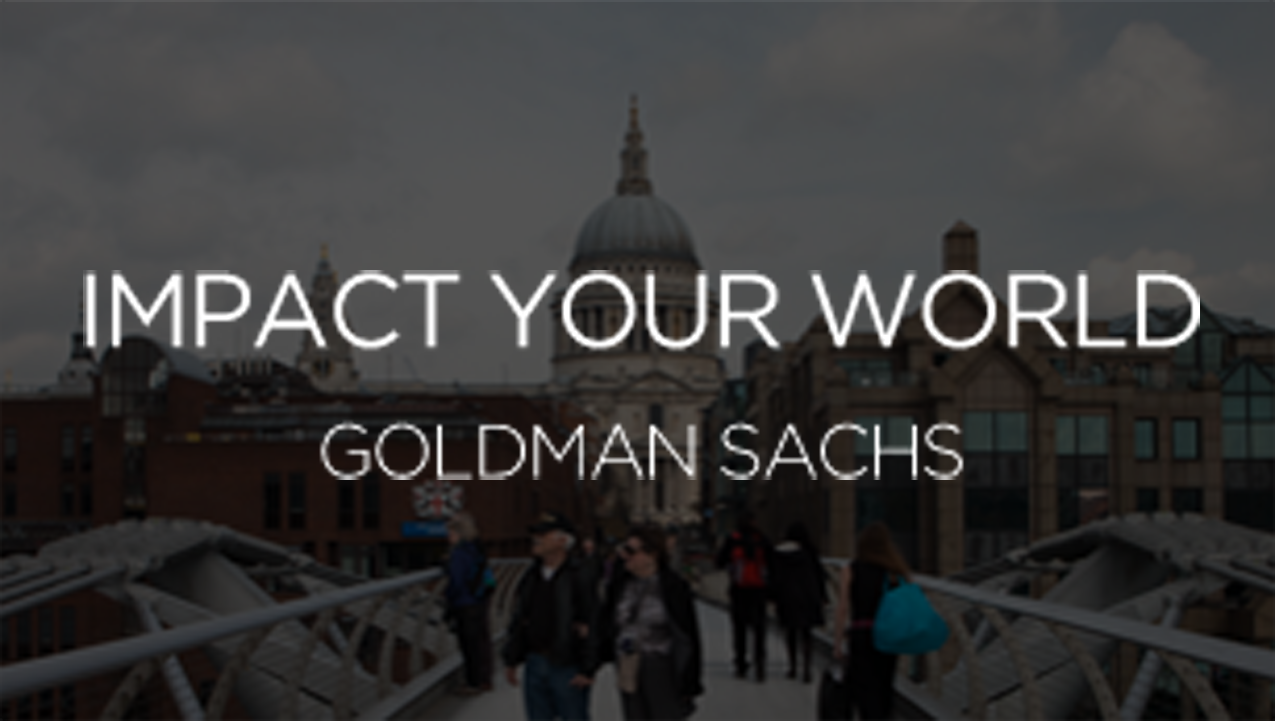
<style>
.page{position:relative;width:1275px;height:721px}
.page>*{position:absolute;margin:0}
.t1{font:104.1px/113.2px "Gotham-Book";letter-spacing:-0.045em;color:#ffffff;text-transform:uppercase}
.t2{font:74.9px/129.9px "Gotham-Light";letter-spacing:-0.045em;color:#ffffff;text-transform:uppercase}
</style>
<div class="page">
<p class="t1" style="left:83px;top:270px;width:1117px;height:210px;text-align:center">IMPACT YOUR WORLD<br><span class="t2">GOLDMAN SACHS</span></p>
</div>
